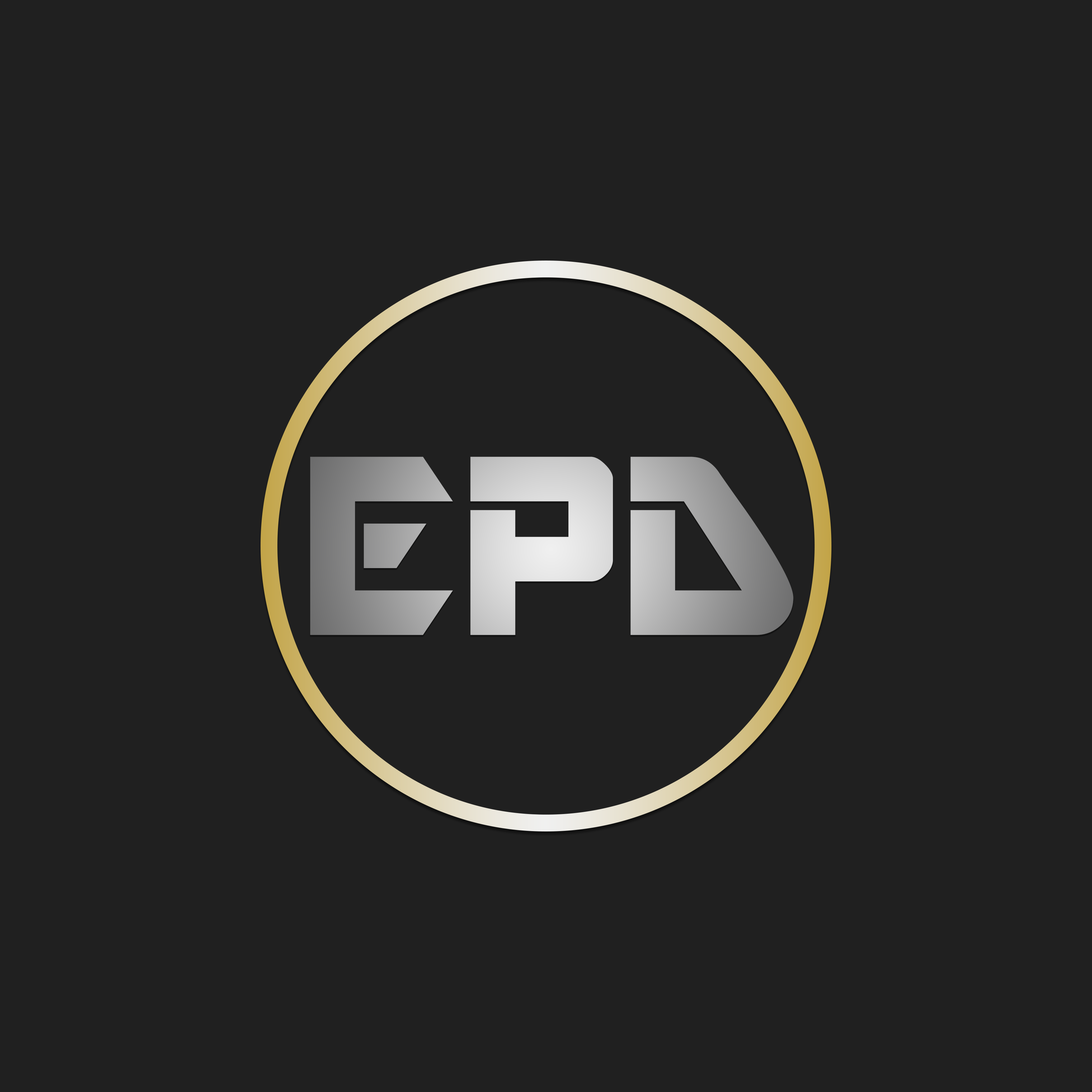
<style>
.page{position:relative;width:1092px;height:1092px;background:#202020}
.page>*{position:absolute;margin:0}
.t1{font:282.7px "ARDESTINE";font-variant:small-caps}
</style>
<div class="page">
<p class="t1" style="left:310px;top:457px;width:483px;height:178px">EPD</p>
</div>
